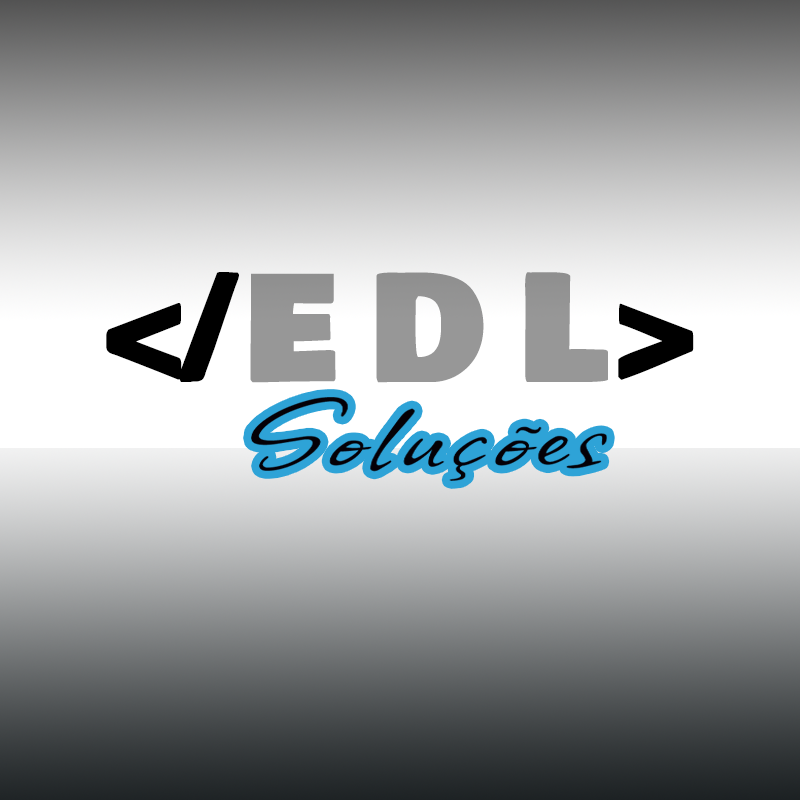
<style>
.page{position:relative;width:800px;height:800px}
.page>*{position:absolute;margin:0}
.t1{font:138.9px "BowlbyOneSC-Regular";letter-spacing:-0.04em;color:#000000}
.t2{font:145.1px "BowlbyOneSC-Regular";letter-spacing:-0.04em;color:#979797}
.t3{font:115.6px "Allison-Regular";letter-spacing:0.05em;color:#08090e;scale:1.3 1}
</style>
<div class="page">
<p class="t1" style="left:106px;top:272px;width:133px;height:110px">&lt;/</p>
<p class="t2" style="left:250px;top:272px;width:358px;height:111px">E D L</p>
<p class="t1" style="left:618px;top:303px;width:76px;height:77px">&gt;</p>
<p class="t3" style="left:251px;top:397px;width:356px;height:84px">Soluções</p>
</div>
